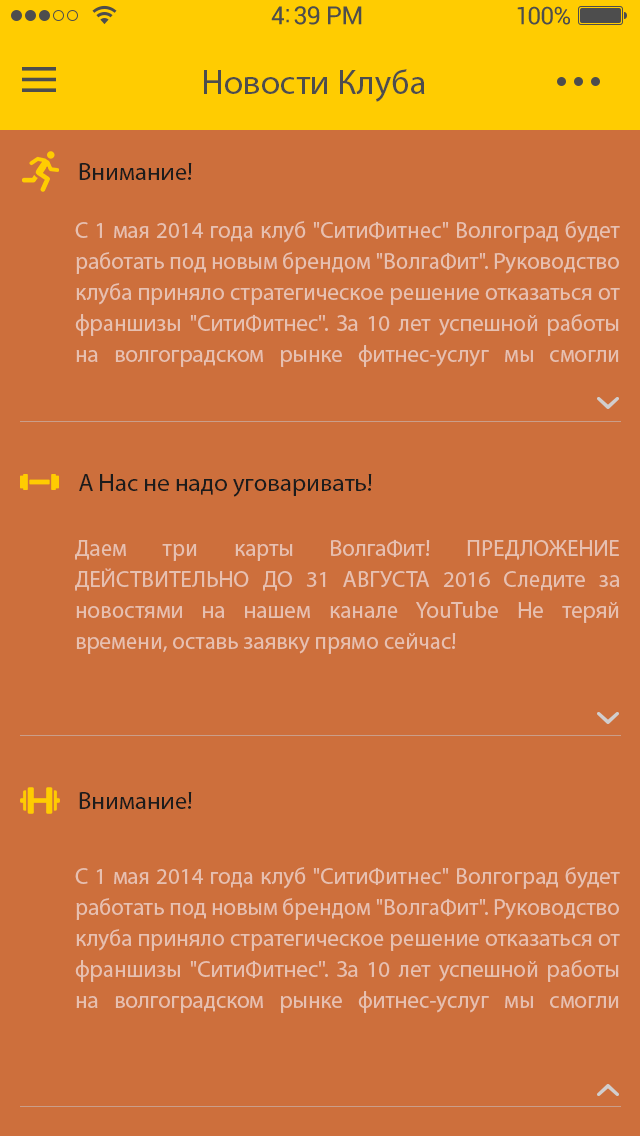
<style>
.page{position:relative;width:640px;height:1136px;background:#cd6f3c}
.page>*{position:absolute;margin:0}
.t1{font:35px "MyriadPro-Regular";color:#4d4d4d}
.t2{font:25px "MyriadPro-Regular";color:#1c1c1c}
.t3{font:23px/31px "MyriadPro-Regular";color:#e7c0b0}
</style>
<div class="page">
<p class="t1" style="left:204px;top:69px;width:221px;height:33px">Новости Клуба</p>
<p class="t2" style="left:79px;top:163px;width:113px;height:17px">Внимание!</p>
<p class="t3" style="left:75px;top:221px;width:545px;height:146px;text-align:justify">C 1 мая 2014 года клуб "СитиФитнес" Волгоград будет работать под новым брендом "ВолгаФит". Руководство клуба приняло стратегическое решение отказаться от франшизы "СитиФитнес". За 10 лет успешной работы на волгоградском рынке фитнес-услуг мы смогли накопить большой опыт управления, оптимизировать все внутренние бизнес-процессы и сформировать профессиональную команду.</p>
<p class="t2" style="left:79px;top:474px;width:293px;height:23px">А Нас не надо уговаривать!</p>
<p class="t3" style="left:75px;top:539px;width:545px;height:115px;text-align:justify">Даем три карты ВолгаФит! ПРЕДЛОЖЕНИЕ ДЕЙСТВИТЕЛЬНО ДО 31 АВГУСТА 2016 Следите за новостями на нашем канале YouTube Не теряй времени, оставь заявку прямо сейчас!</p>
<p class="t2" style="left:79px;top:792px;width:113px;height:17px">Внимание!</p>
<p class="t3" style="left:75px;top:867px;width:545px;height:146px;text-align:justify">C 1 мая 2014 года клуб "СитиФитнес" Волгоград будет работать под новым брендом "ВолгаФит". Руководство клуба приняло стратегическое решение отказаться от франшизы "СитиФитнес". За 10 лет успешной работы на волгоградском рынке фитнес-услуг мы смогли накопить большой опыт управления, оптимизировать все внутренние бизнес-процессы и сформировать профессиональную команду.</p>
</div>
